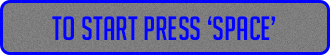
<style>
.page{position:relative;width:330px;height:55px}
.page>*{position:absolute;margin:0}
.t1{font:33px "BigNoodleTitling";color:#0202fd}
</style>
<div class="page">
<p class="t1" style="left:52px;top:16px;width:223px;height:24px">To Start Press ‘Space’</p>
</div>
